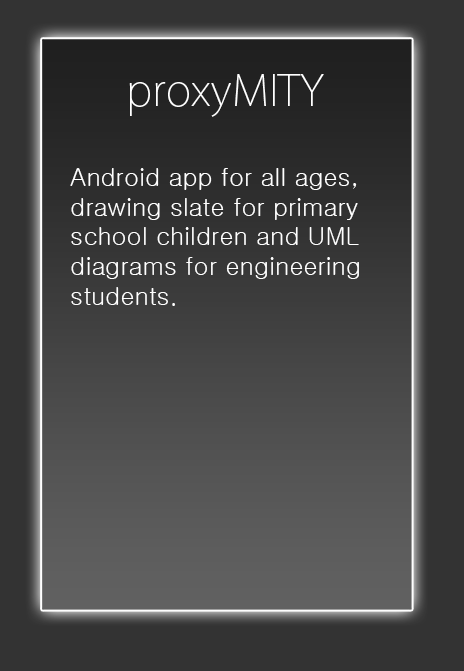
<style>
.page{position:relative;width:464px;height:671px;background:#333333}
.page>*{position:absolute;margin:0}
.t1{font:42.9px "KozGoPr6N-ExtraLight";color:#ffffff}
.t2{font:24.9px "Gulim";color:#ffffff}
</style>
<div class="page">
<p class="t1" style="left:129px;top:74px;width:195px;height:43px">proxyMITY</p>
<p class="t2" style="left:70px;top:168px;width:289px;height:138px">Android app for all ages,  drawing slate for primary school children and UML diagrams for engineering students.</p>
</div>
